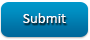
<style>
.page{position:relative;width:90px;height:40px}
.page>*{position:absolute;margin:0}
.t1{font:15px "Calibri";color:#fffefe}
</style>
<div class="page">
<p class="t1" style="left:23px;top:13px;width:43px;height:10px">Submit</p>
</div>
